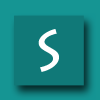
<style>
.page{position:relative;width:100px;height:100px;background:#107978}
.page>*{position:absolute;margin:0}
.t1{font:58px "LithosPro-Regular";color:#ffffff}
</style>
<div class="page">
<p class="t1" style="left:38px;top:29px;width:21px;height:43px">S</p>
</div>
